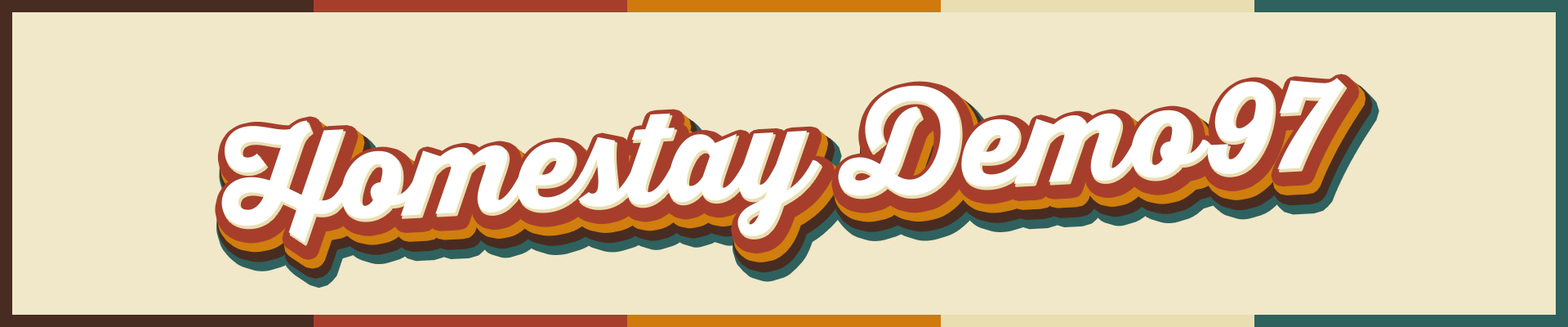
<style>
.page{position:relative;width:1568px;height:327px;background:#f0e8c8}
.page>*{position:absolute;margin:0}
.t1{font:122.5px "ThirstyScriptExtraboldDemo";color:#ffffff}
</style>
<div class="page">
<p class="t1" style="left:221px;top:78px;width:1124px;height:165px;rotate:-3deg">Homestay Demo97</p>
<p class="t1" style="left:221px;top:78px;width:1124px;height:165px;rotate:-3deg">Homestay Demo97</p>
<p class="t1" style="left:221px;top:78px;width:1124px;height:165px;rotate:-3deg">Homestay Demo97</p>
<p class="t1" style="left:221px;top:78px;width:1124px;height:165px;rotate:-3deg">Homestay Demo97</p>
<p class="t1" style="left:221px;top:78px;width:1124px;height:165px;rotate:-3deg">Homestay Demo97</p>
</div>
